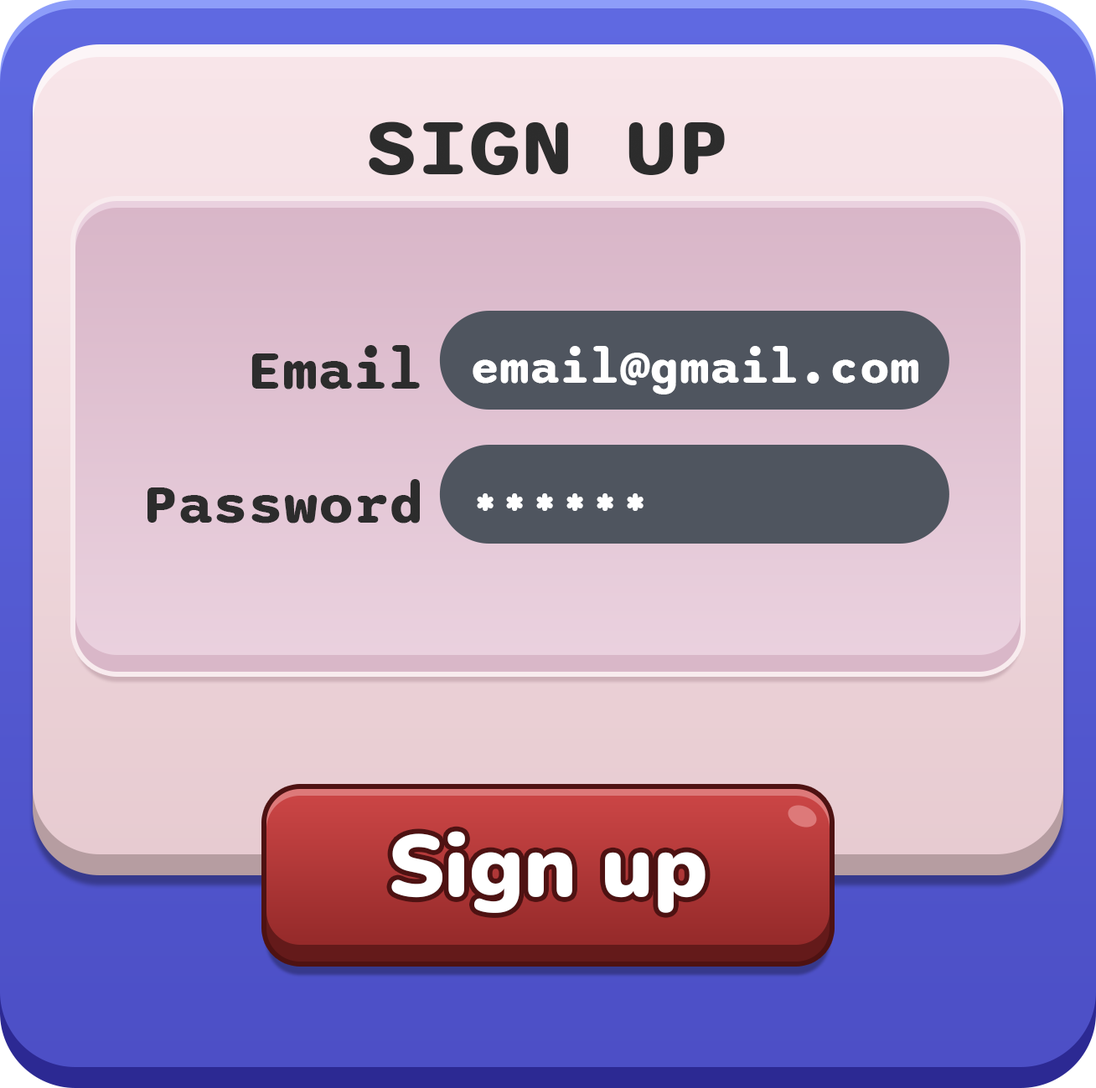
<style>
.page{position:relative;width:1096px;height:1088px}
.page>*{position:absolute;margin:0}
.t1{font:83.8px "Sono-Bold";color:#2c2c2c}
.t2{font:57px "Sono-Bold";color:#2c2c2c}
.t3{font:48.4px "Sono-Bold";color:#ffffff}
.t4{font:87.1px "Nunito-Black";color:#ffffff}
</style>
<div class="page">
<p class="t1" style="left:369px;top:121px;width:356px;height:54px">SIGN UP</p>
<p class="t2" style="left:251px;top:345px;width:169px;height:45px">Email</p>
<p class="t3" style="left:472px;top:346px;width:446px;height:49px">email@gmail.com</p>
<p class="t2" style="left:147px;top:479px;width:273px;height:45px">Password</p>
<p class="t3" style="left:477px;top:493px;width:166px;height:18px">******</p>
<p class="t4" style="left:391px;top:831px;width:314px;height:82px">Sign up</p>
</div>
